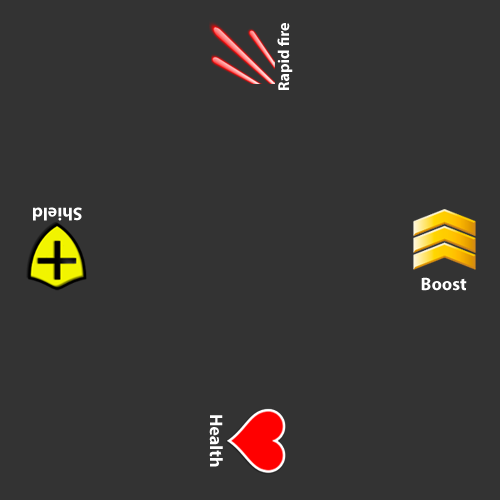
<style>
.page{position:relative;width:500px;height:500px;background:#333333}
.page>*{position:absolute;margin:0}
.t1{font:16px "MyriadPro-Bold";color:#ffffff}
.t2{font:18px "MyriadPro-Bold";color:#ffffff}
</style>
<div class="page">
<p class="t1" style="left:277px;top:23px;width:16px;height:67px;rotate:-90deg">Rapid fire</p>
<p class="t2" style="left:33px;top:207px;width:49px;height:14px;rotate:180deg">Shield</p>
<p class="t2" style="left:421px;top:277px;width:46px;height:14px">Boost</p>
<p class="t2" style="left:209px;top:415px;width:14px;height:52px;rotate:90deg">Health</p>
</div>
